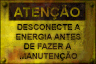
<style>
.page{position:relative;width:96px;height:64px}
.page>*{position:absolute;margin:0}
.t1{font:13px "Arial-BoldMT";letter-spacing:0.005em;scale:1.05 1}
.t2{font:8.2px/9.6px "Arial-BoldMT";text-transform:uppercase}
</style>
<div class="page">
<p class="t1" style="left:13px;top:5px;width:67px;height:15px">ATENÇÃO</p>
<p class="t2" style="left:16px;top:24px;width:65px;height:37px;text-align:center">DESCONECTE A<br>ENERGIA ANTES<br>DE FAZER A <br>MANUTENÇÃO</p>
</div>
